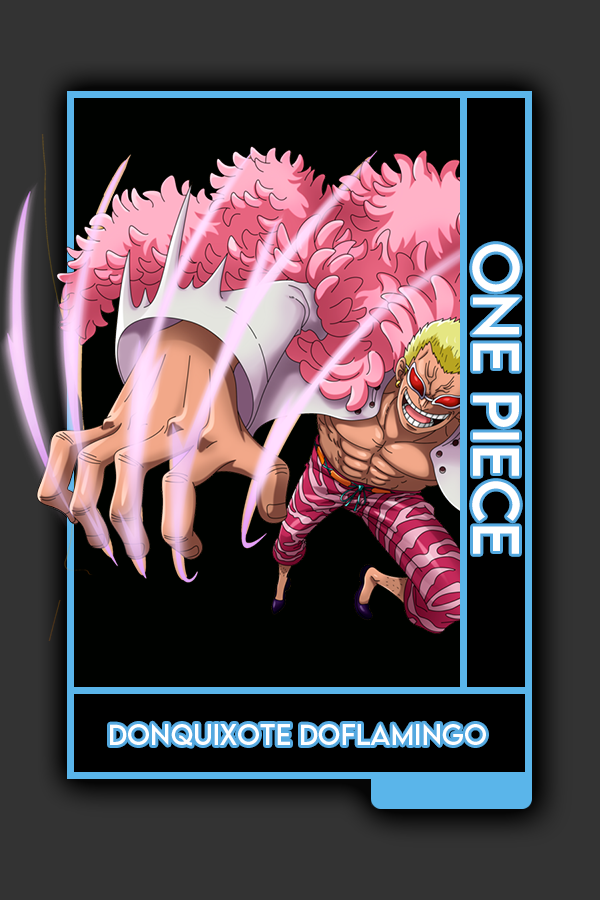
<style>
.page{position:relative;width:600px;height:900px;background:#333333}
.page>*{position:absolute;margin:0}
.t1{font:58.4px "LEMONMILK-Regular";color:#ffffff}
.t2{font:25.9px "LEMONMILK-Regular";color:#ffffff}
</style>
<div class="page">
<p class="t1" style="left:472px;top:244px;width:48px;height:310px;rotate:90deg">One Piece</p>
<p class="t2" style="left:110px;top:723px;width:376px;height:23px">Donquixote Doflamingo</p>
</div>
